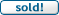
<style>
.page{position:relative;width:59px;height:15px;background:#ffffff}
.page>*{position:absolute;margin:0}
.t1{font:10.8px "TrebuchetMS";letter-spacing:0.025em;color:#006699;font-weight:bold;scale:1.11 1}
</style>
<div class="page">
<p class="t1" style="left:16px;top:3px;width:27px;height:9px">sold!</p>
</div>
